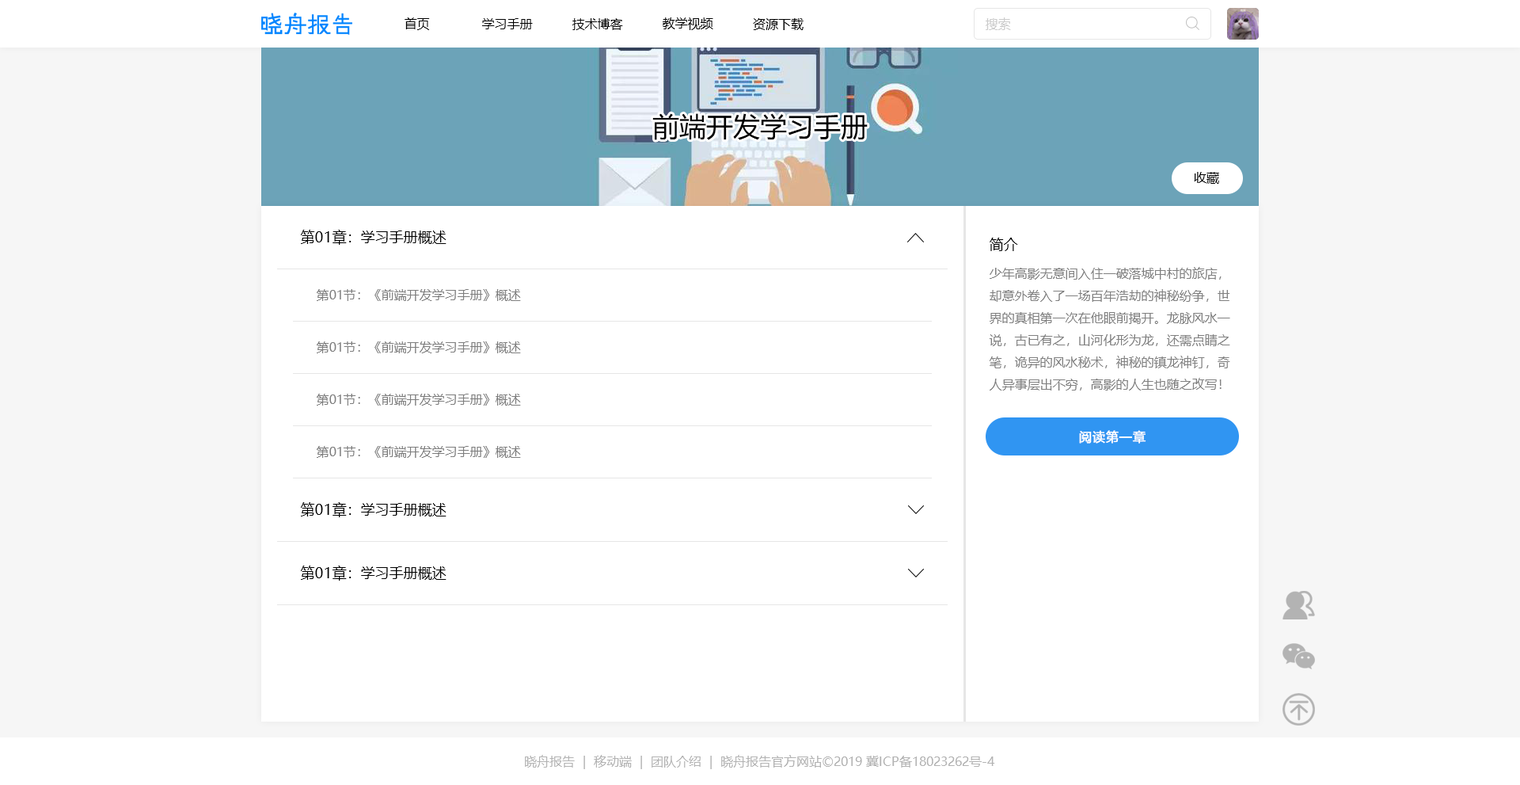
<style>
.page{position:relative;width:1520px;height:785px;background:#ffffff}
.page>*{position:absolute;margin:0}
.t1{font:12.7px "MicrosoftYaHei";color:#000000}
.t2{font:12.7px "MicrosoftYaHei";color:#cccccc}
.t3{font:26.9px "MicrosoftYaHei";color:#000000}
.t4{font:14.2px "MicrosoftYaHei";color:#000000}
.t5{font:12.7px "MicrosoftYaHei";color:#808080}
.t6{font:12.7px "MicrosoftYaHei";color:#7e7e7e}
.t7{font:12.7px "MicrosoftYaHei";color:#ffffff;font-weight:bold}
.t8{font:12.7px "MicrosoftYaHei";color:#b3b3b3}
</style>
<div class="page">
<p class="t1" style="left:405px;top:17px;width:25px;height:13px">首页</p>
<p class="t1" style="left:663px;top:17px;width:50px;height:13px">教学视频</p>
<p class="t2" style="left:986px;top:17px;width:25px;height:13px">搜索</p>
<p class="t1" style="left:482px;top:18px;width:51px;height:11px">学习手册</p>
<p class="t1" style="left:572px;top:18px;width:51px;height:12px">技术博客</p>
<p class="t1" style="left:753px;top:18px;width:51px;height:12px">资源下载</p>
<p class="t3" style="left:652px;top:113px;width:216px;height:27px">前端开发学习手册</p>
<p class="t1" style="left:1194px;top:172px;width:25px;height:12px">收藏</p>
<p class="t4" style="left:301px;top:230px;width:145px;height:15px">第01章：学习手册概述</p>
<p class="t4" style="left:990px;top:237px;width:28px;height:14px">简介</p>
<p class="t5" style="left:989px;top:267px;width:241px;height:123px">少年高影无意间入住一破落城中村的旅店，<br>却意外卷入了一场百年浩劫的神秘纷争，世<br>界的真相第一次在他眼前揭开。龙脉风水一<br>说，古已有之，山河化形为龙，还需点睛之<br>笔，诡异的风水秘术，神秘的镇龙神钉，奇<br>人异事层出不穷，高影的人生也随之改写！</p>
<p class="t6" style="left:317px;top:289px;width:204px;height:12px">第01节：《前端开发学习手册》概述</p>
<p class="t6" style="left:317px;top:341px;width:204px;height:12px">第01节：《前端开发学习手册》概述</p>
<p class="t6" style="left:317px;top:393px;width:204px;height:12px">第01节：《前端开发学习手册》概述</p>
<p class="t7" style="left:1079px;top:430px;width:67px;height:13px">阅读第一章</p>
<p class="t6" style="left:317px;top:446px;width:204px;height:12px">第01节：《前端开发学习手册》概述</p>
<p class="t4" style="left:301px;top:502px;width:145px;height:15px">第01章：学习手册概述</p>
<p class="t4" style="left:301px;top:565px;width:145px;height:15px">第01章：学习手册概述</p>
<p class="t8" style="left:525px;top:754px;width:470px;height:15px">晓舟报告  |  移动端  |  团队介绍  |  晓舟报告官方网站©2019 冀ICP备18023262号-4</p>
</div>
